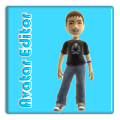
<style>
.page{position:relative;width:120px;height:120px;background:#40d9ff}
.page>*{position:absolute;margin:0}
.t1{font:16.7px "Bauhaus93"}
</style>
<div class="page">
<p class="t1" style="left:18px;top:13px;width:13px;height:94px;rotate:-90deg">Avatar Editor</p>
</div>
